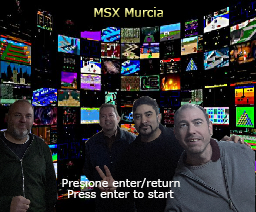
<style>
.page{position:relative;width:256px;height:212px}
.page>*{position:absolute;margin:0}
.t1{font:12px "Verdana"}
.t2{font:11px "Verdana";color:#ffffff}
</style>
<div class="page">
<p class="t1" style="left:94px;top:7px;width:69px;height:10px">MSX Murcia</p>
<p class="t2" style="left:62px;top:178px;width:118px;height:10px">Presione enter/return</p>
<p class="t2" style="left:68px;top:190px;width:106px;height:8px">Press enter to start</p>
</div>
